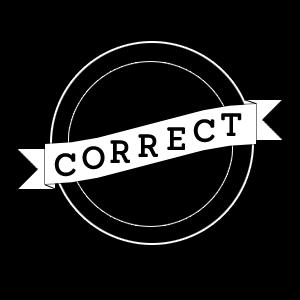
<style>
.page{position:relative;width:300px;height:300px;background:#000000}
.page>*{position:absolute;margin:0}
.t1{font:30px "Sanchez-Regular";letter-spacing:0.04em;color:#000000;font-weight:bold}
</style>
<div class="page">
<p class="t1" style="left:221px;top:113px;width:21px;height:23px">T</p>
<p class="t1" style="left:193px;top:119px;width:22px;height:24px">C</p>
<p class="t1" style="left:138px;top:134px;width:20px;height:23px">R</p>
<p class="t1" style="left:167px;top:127px;width:18px;height:23px">E</p>
<p class="t1" style="left:82px;top:146px;width:23px;height:24px">O</p>
<p class="t1" style="left:110px;top:140px;width:20px;height:23px">R</p>
<p class="t1" style="left:54px;top:153px;width:22px;height:24px">C</p>
</div>
